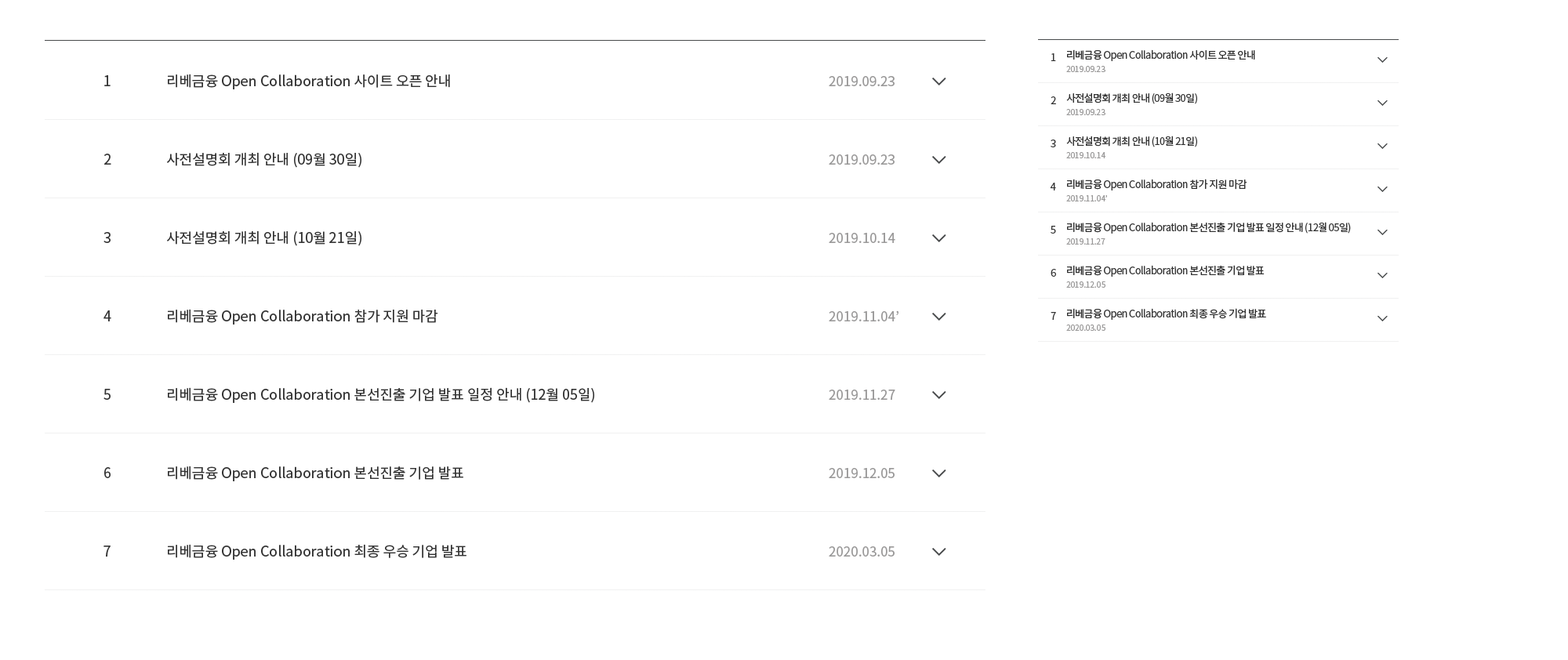
<style>
.page{position:relative;width:1568px;height:660px;background:#ffffff}
.page>*{position:absolute;margin:0}
.t1{font:10.2px/43.1px "NotoSansKR-Regular";letter-spacing:-0.05em;color:#333333}
.t2{font:14.1px/78.4px "NotoSansKR-Regular";letter-spacing:-0.05em;color:#333333}
.t3{font:14.1px/78.4px "NotoSansKR-Regular";color:#333333}
.t4{font:13.3px/78.4px "NotoSansKR-Regular";color:#999898}
</style>
<div class="page">
<p class="t1" style="left:1050px;top:53px;width:6px;height:267px;text-align:justify">1<br>2<br>3<br>4<br>5<br>6<br>7</p>
<p class="t1" style="left:1066px;top:49px;width:285px;height:271px;text-align:justify">리베금융 Open Collaboration 사이트 오픈 안내<br>사전설명회 개최 안내 (09월 30일)<br>사전설명회 개최 안내 (10월 21일)<br>리베금융 Open Collaboration 참가 지원 마감<br>리베금융 Open Collaboration 본선진출 기업 발표 일정 안내 (12월 05일)<br>리베금융 Open Collaboration 본선진출 기업 발표<br>리베금융 Open Collaboration 최종 우승 기업 발표</p>
<p class="t2" style="left:103px;top:75px;width:8px;height:482px;text-align:justify">1<br>2<br>3<br>4<br>5<br>6<br>7</p>
<p class="t3" style="left:167px;top:74px;width:427px;height:486px;text-align:justify">리베금융 Open Collaboration 사이트 오픈 안내<br>사전설명회 개최 안내 (09월 30일)<br>사전설명회 개최 안내 (10월 21일)<br>리베금융 Open Collaboration 참가 지원 마감<br>리베금융 Open Collaboration 본선진출 기업 발표 일정 안내 (12월 05일)<br>리베금융 Open Collaboration 본선진출 기업 발표<br>리베금융 Open Collaboration 최종 우승 기업 발표</p>
<p class="t4" style="left:829px;top:76px;width:69px;height:481px;text-align:justify">2019.09.23<br>2019.09.23<br>2019.10.14<br>2019.11.04’<br>2019.11.27<br>2019.12.05<br>2020.03.05</p>
</div>
